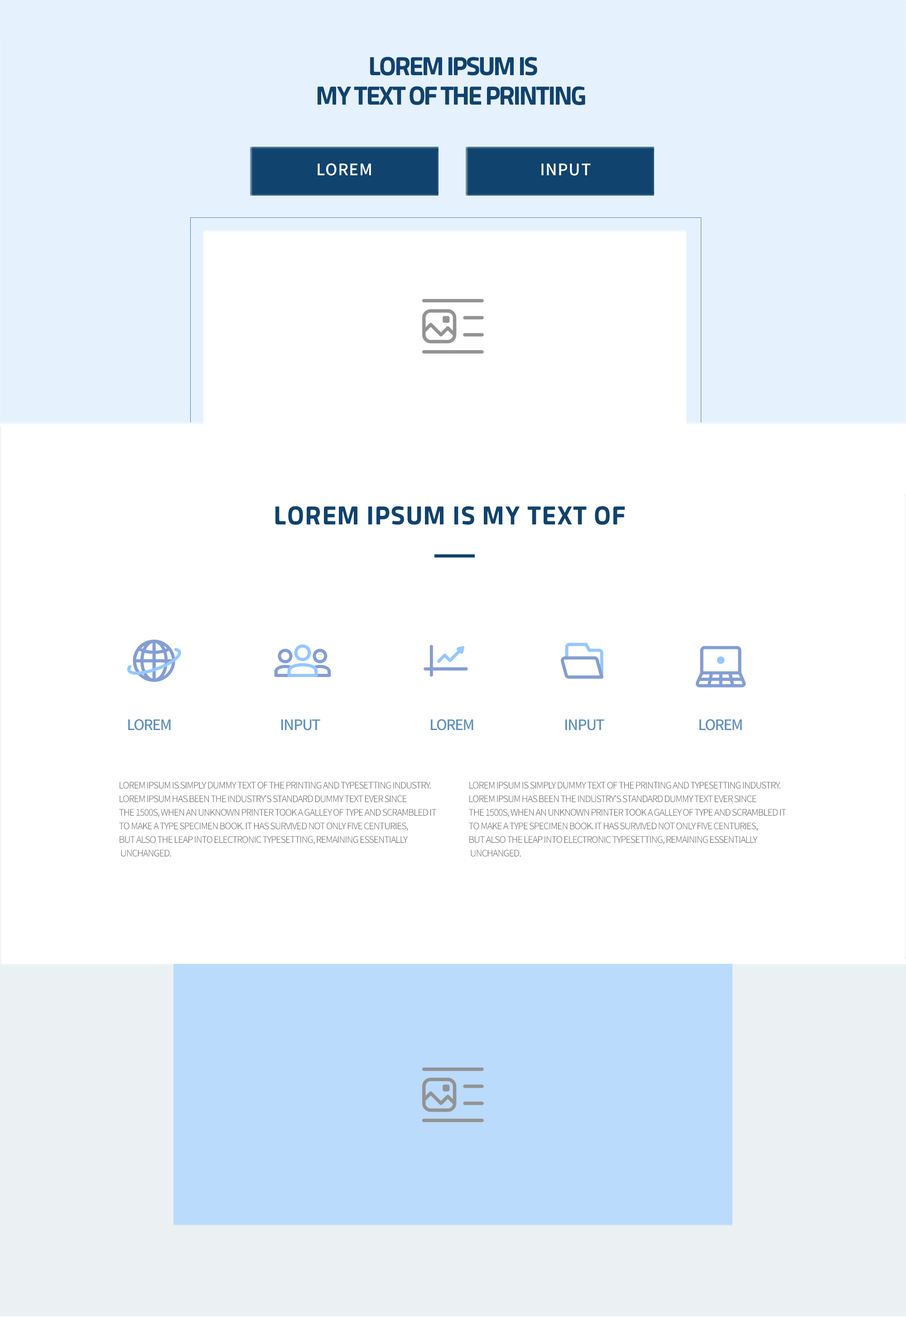
<style>
.page{position:relative;width:906px;height:1317px;background:#ffffff}
.page>*{position:absolute;margin:0}
.t1{font:20.1px/29.5px "OTRecipekoreaM";letter-spacing:-0.08em;color:#10436e;text-transform:uppercase}
.t2{font:15.8px "NotoSansCJKkr-Medium";letter-spacing:0.04em;color:#ffffff;text-transform:uppercase}
.t3{font:20.1px "OTRecipekoreaM";letter-spacing:0.04em;color:#10436e;text-transform:uppercase}
.t4{font:14.5px "NotoSansCJKkr-Medium";letter-spacing:-0.06em;color:#6091bb;text-transform:uppercase}
.t5{font:9.1px/13.6px "NotoSansCJKkr-Light";letter-spacing:-0.06em;color:#5e5e5e;text-transform:uppercase}
</style>
<div class="page">
<p class="t1" style="left:317px;top:57px;width:268px;height:48px;text-align:center">Lorem Ipsum is<br>my text of the printing</p>
<p class="t2" style="left:317px;top:163px;width:54px;height:13px">Lorem</p>
<p class="t2" style="left:541px;top:163px;width:49px;height:13px">input</p>
<p class="t3" style="left:275px;top:506px;width:350px;height:19px">Lorem Ipsum is my text of</p>
<p class="t4" style="left:128px;top:719px;width:43px;height:11px">Lorem</p>
<p class="t4" style="left:281px;top:719px;width:39px;height:11px">input</p>
<p class="t4" style="left:431px;top:719px;width:42px;height:11px">Lorem</p>
<p class="t4" style="left:565px;top:719px;width:39px;height:11px">input</p>
<p class="t4" style="left:699px;top:719px;width:43px;height:11px">Lorem</p>
<p class="t5" style="left:119px;top:782px;width:317px;height:75px">Lorem Ipsum is simply dummy text of the printing and typesetting industry. <br>Lorem Ipsum has been the industry's standard dummy text ever since <br>the 1500s, when an unknown printer took a galley of type and scrambled it <br>to make a type specimen book. It has survived not only five centuries, <br>but also the leap into electronic typesetting, remaining essentially<br> unchanged.</p>
<p class="t5" style="left:469px;top:782px;width:317px;height:75px">Lorem Ipsum is simply dummy text of the printing and typesetting industry. <br>Lorem Ipsum has been the industry's standard dummy text ever since <br>the 1500s, when an unknown printer took a galley of type and scrambled it <br>to make a type specimen book. It has survived not only five centuries, <br>but also the leap into electronic typesetting, remaining essentially<br> unchanged.</p>
</div>
